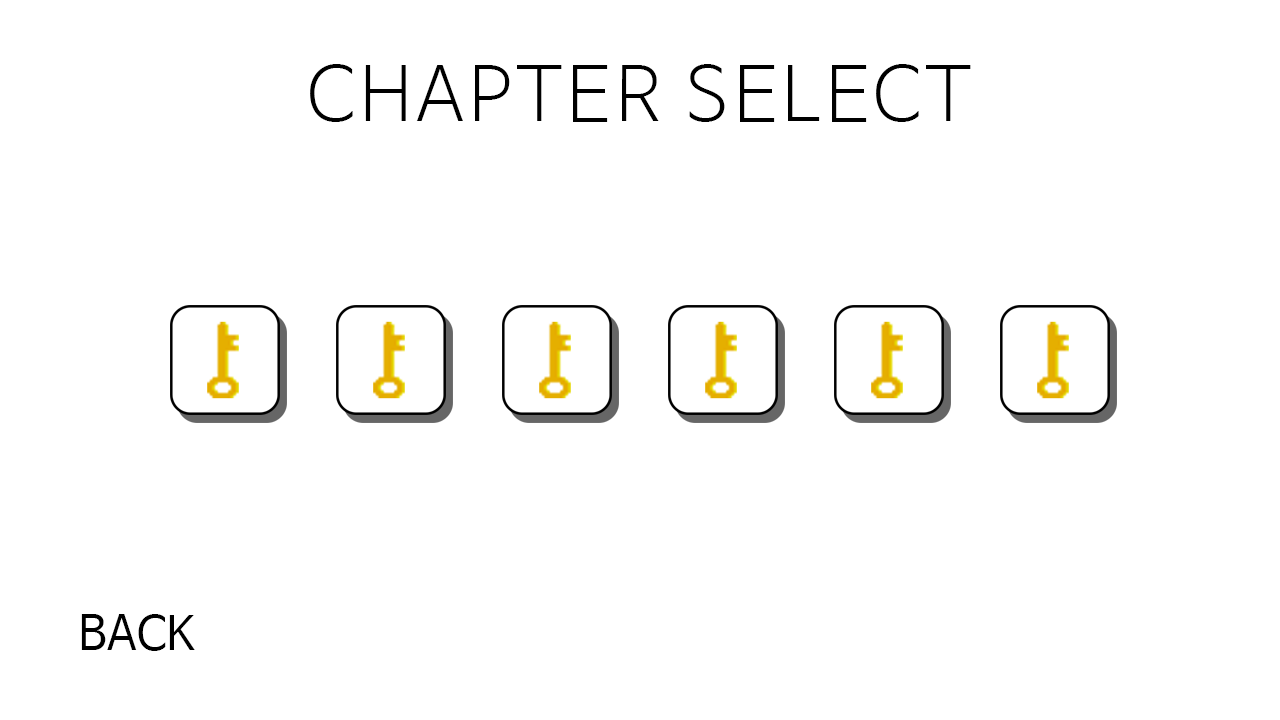
<style>
.page{position:relative;width:1280px;height:720px;background:#ffffff}
.page>*{position:absolute;margin:0}
.t1{font:75px "NanumBarunGothicLight";letter-spacing:0.05em;color:#000000}
.t2{font:45.8px "NanumBarunGothic";color:#000000}
</style>
<div class="page">
<p class="t1" style="left:310px;top:64px;width:661px;height:58px">CHAPTER SELECT</p>
<p class="t2" style="left:81px;top:614px;width:114px;height:37px">BACK</p>
</div>
